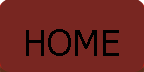
<style>
.page{position:relative;width:144px;height:72px;background:#782621}
.page>*{position:absolute;margin:0}
.t1{font:36px "Tahoma";color:#000000}
</style>
<div class="page">
<p class="t1" style="left:26px;top:29px;width:93px;height:27px">HOME</p>
</div>
